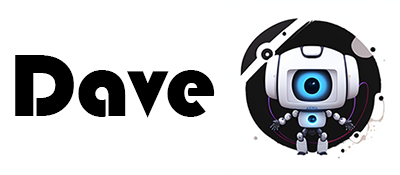
<style>
.page{position:relative;width:400px;height:175px;background:#ffffff}
.page>*{position:absolute;margin:0}
.t1{font:92px "Bauhaus93";color:#000000}
</style>
<div class="page">
<p class="t1" style="left:15px;top:55px;width:200px;height:63px">Dave</p>
</div>
